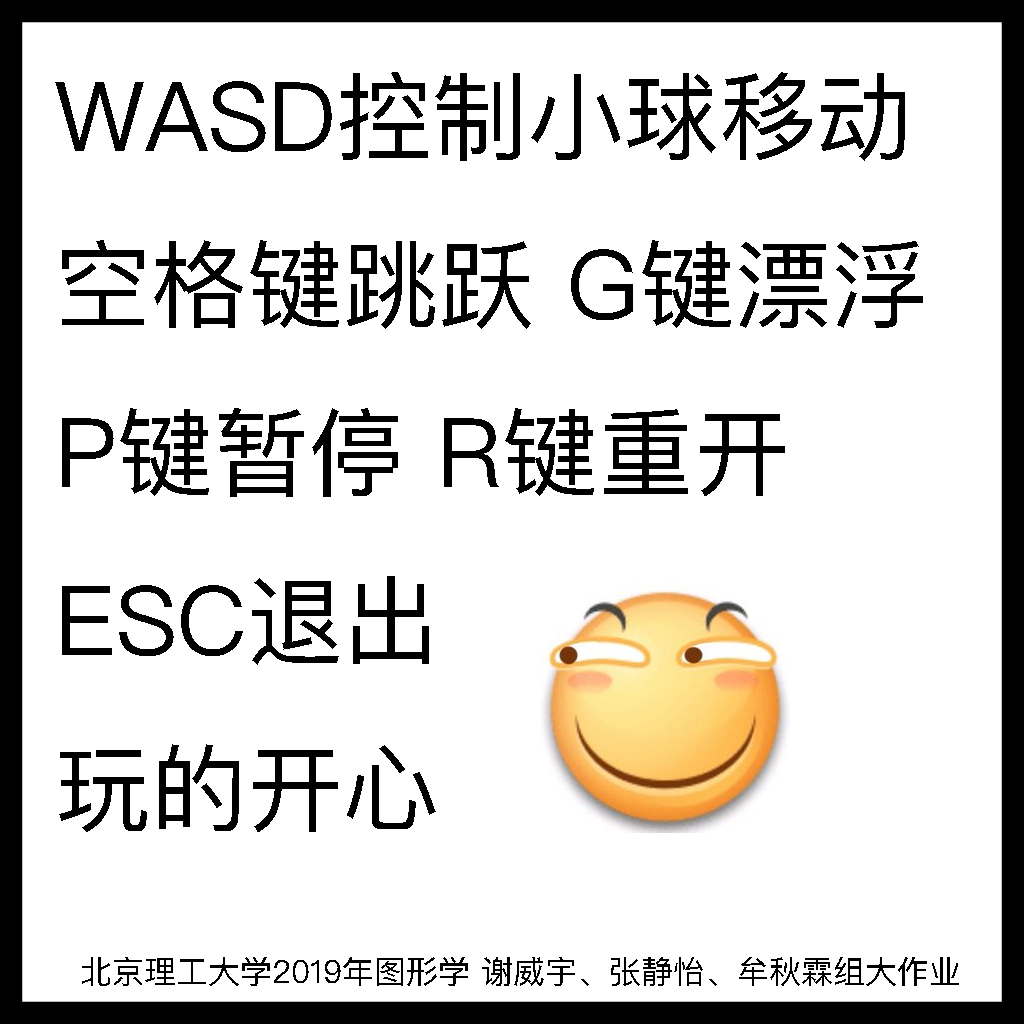
<style>
.page{position:relative;width:1024px;height:1024px;background:#ffffff}
.page>*{position:absolute;margin:0}
.t1{font:96px "PingFangSC-Regular";color:#000000}
.t2{font:32px "PingFangSC-Regular";color:#000000}
</style>
<div class="page">
<p class="t1" style="left:55px;top:72px;width:868px;height:760px">WASD控制小球移动<br>空格键跳跃 G键漂浮<br>P键暂停 R键重开 <br>ESC退出<br>玩的开心</p>
<p class="t2" style="left:82px;top:957px;width:877px;height:29px">北京理工大学2019年图形学 谢威宇、张静怡、牟秋霖组大作业</p>
</div>
